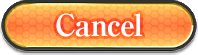
<style>
.page{position:relative;width:198px;height:55px}
.page>*{position:absolute;margin:0}
.t1{font:30px "RyuminPro-ExBold";letter-spacing:-0.04em;color:#ffffff}
</style>
<div class="page">
<p class="t1" style="left:56px;top:13px;width:86px;height:24px">Cancel</p>
</div>
